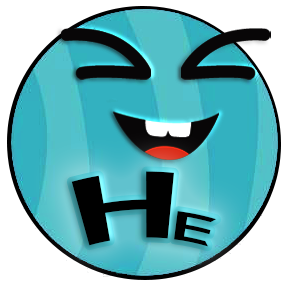
<style>
.page{position:relative;width:291px;height:291px;background:#ffffff}
.page>*{position:absolute;margin:0}
.t1{font:94px "ROGFonts-Regular";color:#000000}
.t2{font:41px "ROGFonts-Regular";color:#000000}
</style>
<div class="page">
<p class="t1" style="left:71px;top:171px;width:146px;height:76px">H<span class="t2">e</span></p>
</div>
